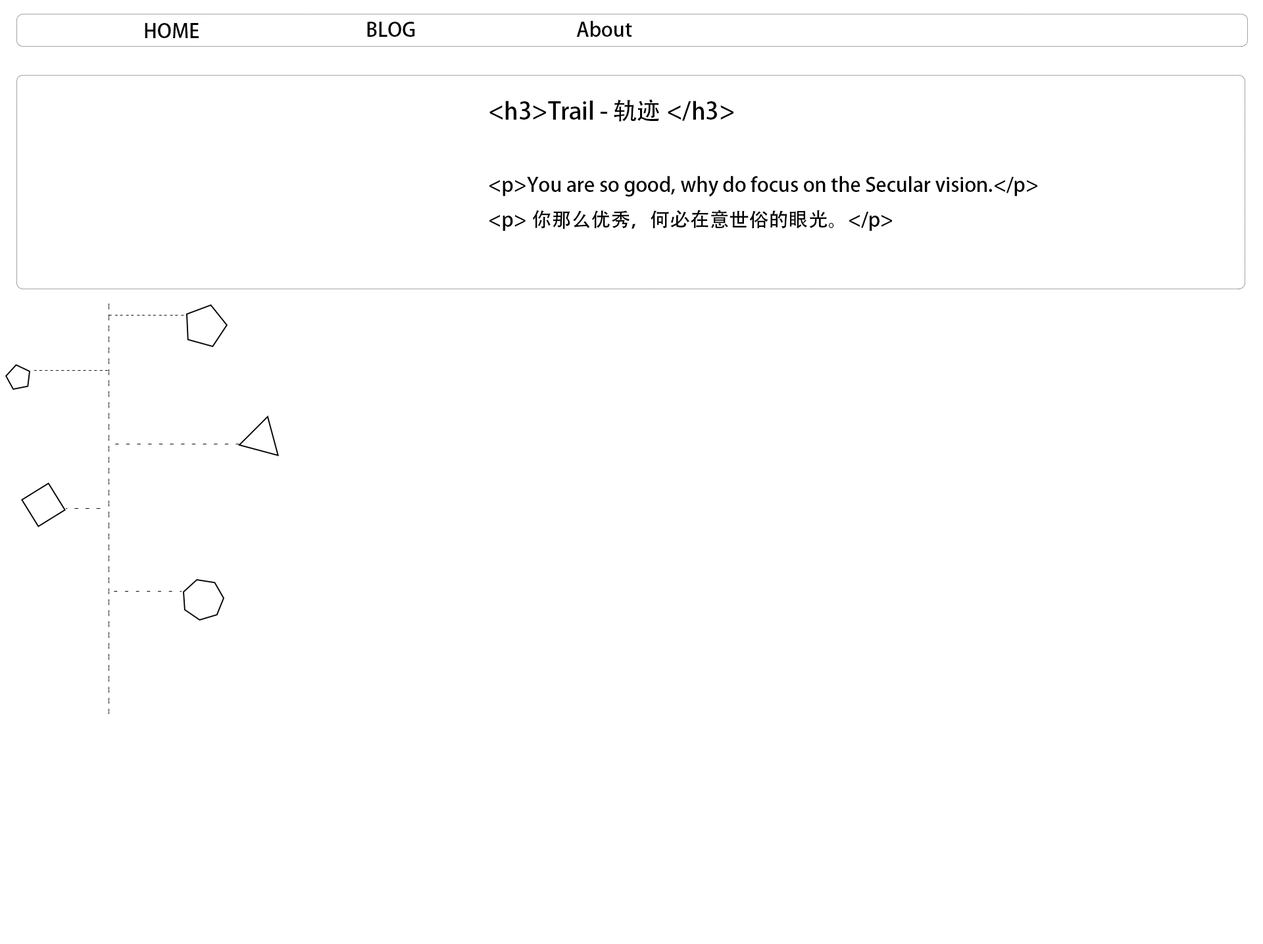
<style>
.page{position:relative;width:1263px;height:944px;background:#ffffff}
.page>*{position:absolute;margin:0}
.t1{font:19.7px "AdobeHeitiStd-Regular";color:#000000}
.t2{font:23.7px "AdobeHeitiStd-Regular";color:#000000}
</style>
<div class="page">
<p class="t1" style="left:145px;top:23px;width:54px;height:15px">HOME</p>
<p class="t1" style="left:367px;top:22px;width:48px;height:15px">BLOG</p>
<p class="t1" style="left:576px;top:20px;width:56px;height:17px">About</p>
<p class="t1" style="left:489px;top:99px;width:548px;height:132px"><span class="t2">&lt;h3&gt;Trail - 轨迹&lt;/h3&gt;<br></span><br>&lt;p&gt;You are so good, why do focus on the Secular vision.&lt;/p&gt;<br>&lt;p&gt;你那么优秀，何必在意世俗的眼光。&lt;/p&gt;</p>
</div>
